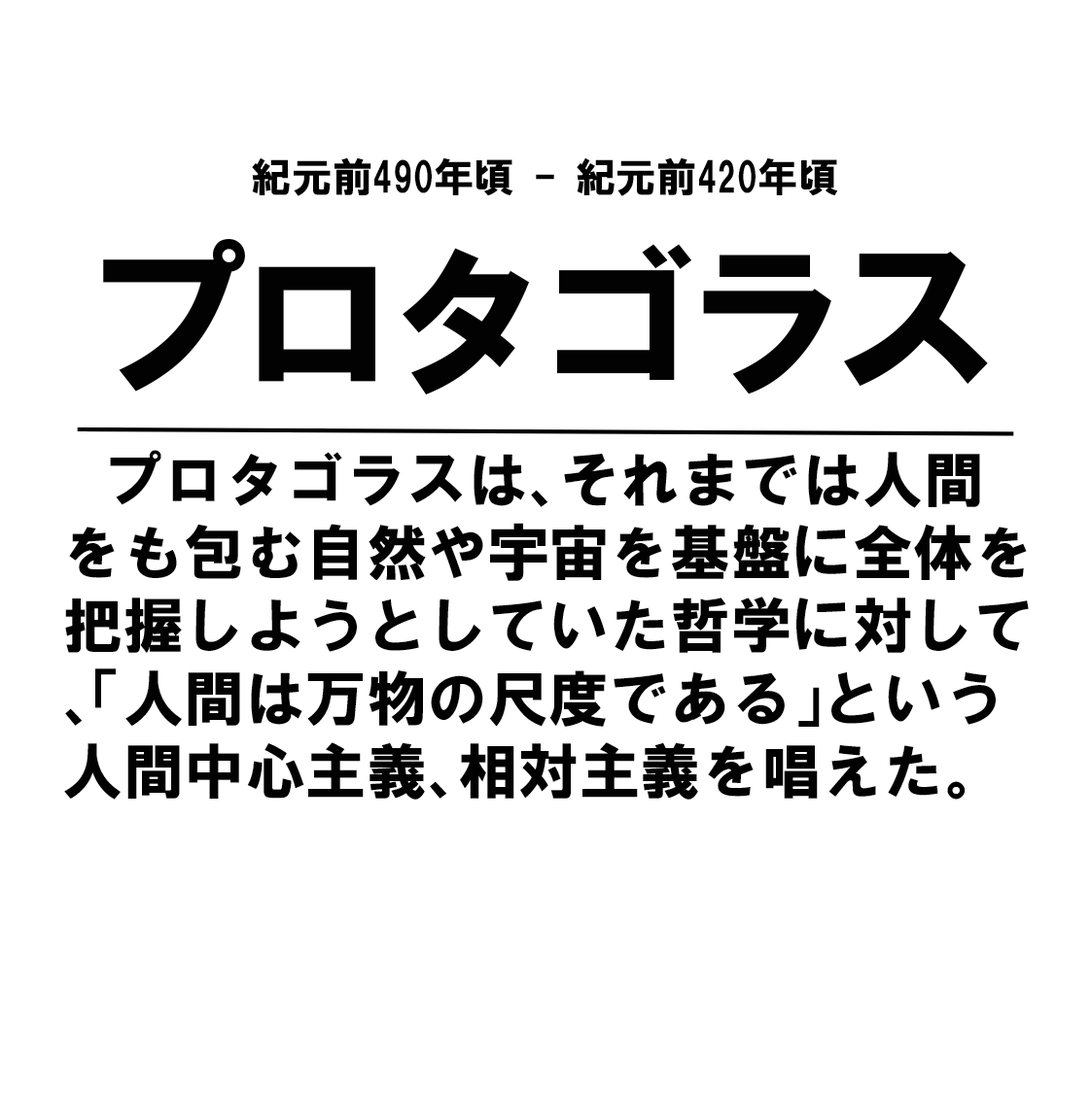
<style>
.page{position:relative;width:1091px;height:1093px;background:#ffffff}
.page>*{position:absolute;margin:0}
.t1{font:40.5px "HGSoeiKakugothicUB";color:#020202}
.t2{font:170.1px "HGSoeiKakugothicUB";letter-spacing:-0.12em;color:#020202}
.t3{font:60.7px/72.9px "HGSoeiKakugothicUB";color:#020202}
.t4{font:40.5px/72.9px "HGSoeiKakugothicUB";color:#020202}
</style>
<div class="page">
<p class="t1" style="left:252px;top:157px;width:586px;height:39px">紀元前490年頃 - 紀元前420年頃</p>
<p class="t2" style="left:103px;top:239px;width:885px;height:156px">プロタゴラス</p>
<p class="t3" style="left:64px;top:450px;width:964px;height:350px"><span class="t4">　</span>プロタゴラスは、それまでは人間をも包む自然や宇宙を基盤に全体を把握しようとしていた哲学に対して、「人間は万物の尺度である」という人間中心主義、相対主義を唱えた。</p>
</div>
